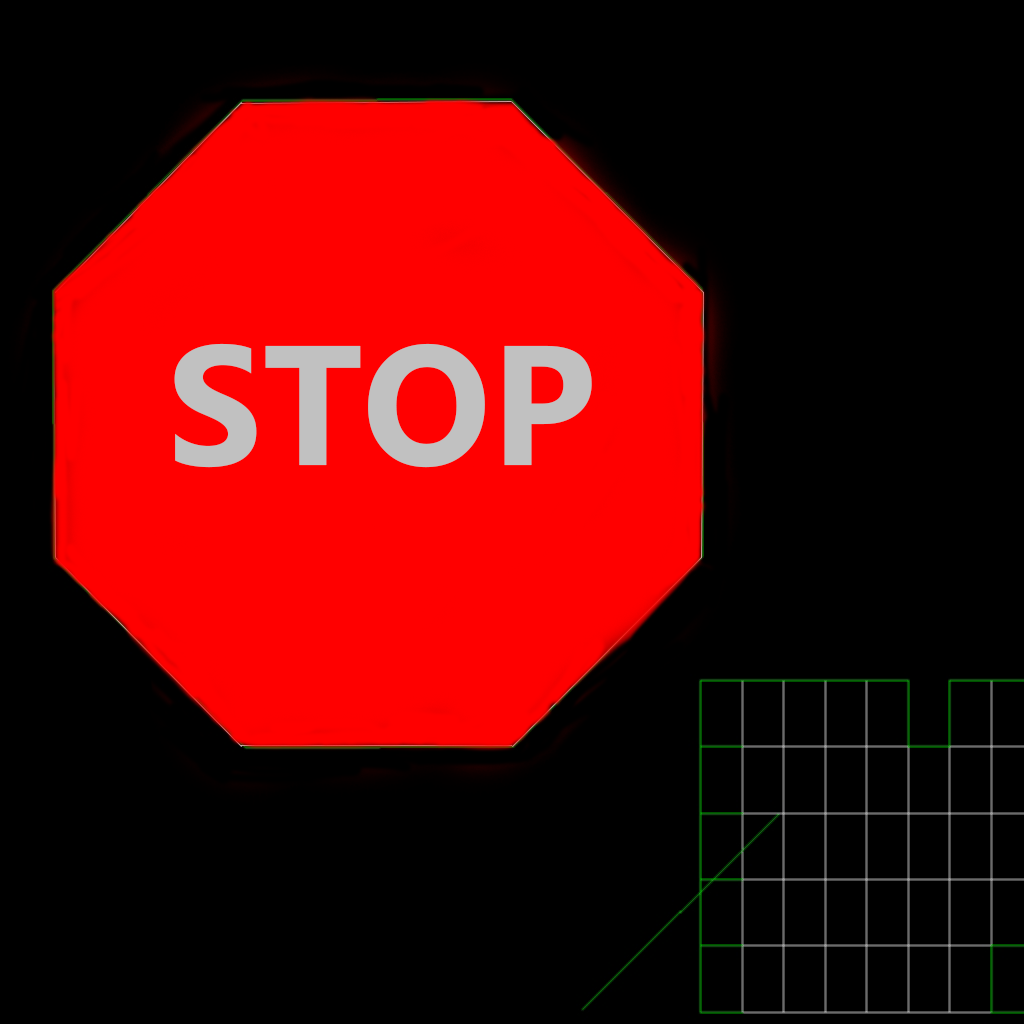
<style>
.page{position:relative;width:1024px;height:1024px;background:#000000}
.page>*{position:absolute;margin:0}
.t1{font:170px "MicrosoftPhagsPa-Bold";color:#c1c1c1}
</style>
<div class="page">
<p class="t1" style="left:174px;top:343px;width:418px;height:125px">STOP</p>
</div>
